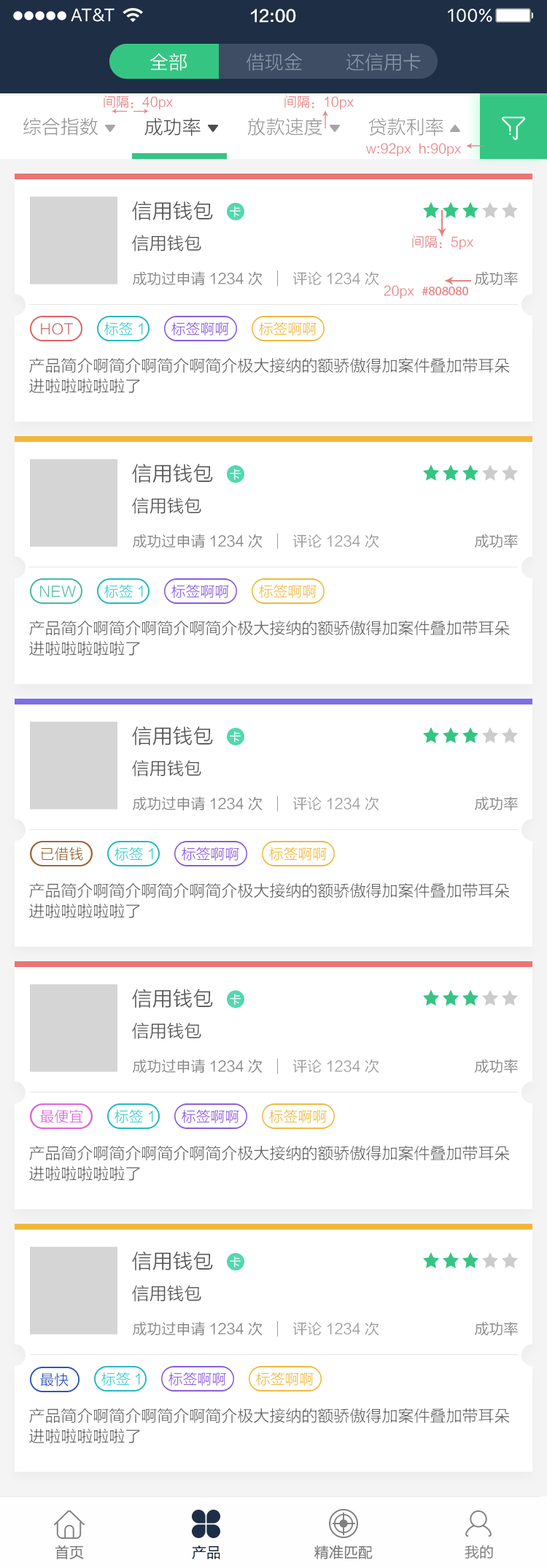
<style>
.page{position:relative;width:547px;height:1568px;background:#ffffff}
.page>*{position:absolute;margin:0}
.t1{font:16px "FZLTZHK--GBK1-0";color:#ffffff}
.t2{font:19px "FZLTXHK";color:#ffffff}
.t3{font:19px "FZLTXHK";color:#8895a8}
.t4{font:13.1px "FZLTXHK";color:#e68181}
.t5{font:19px "FZLTXHK";color:#999999}
.t6{font:19px "FZLTXHK";color:#4d4d4d}
.t7{font:20.4px "FZLTXHK";color:#4d4d4d}
.t8{font:11.7px "FZLTXHK";color:#ffffff}
.t9{font:17.5px "FZLTXHK";color:#4d4d4d}
.t10{font:14.6px "FZLTXHK";color:#808080}
.t11{font:14.6px "FZLTXHK";color:#999999}
.t12{font:13.1px "MyriadPro-Regular";color:#e68181}
.t13{font:14.6px "FZLTXHK";color:#cc6666}
.t14{font:14.6px "FZLTXHK";color:#33cccc}
.t15{font:14.6px "FZLTXHK";color:#8857db}
.t16{font:14.6px "FZLTXHK";color:#f1b73c}
.t17{font:16px/20.4px "FZLTXHK";color:#666666}
.t18{font:14.6px "FZLTXHK";color:#45b991}
.t19{font:14.6px "FZLTXHK";color:#996633}
.t20{font:14.6px "FZLTXHK";color:#db5edc}
.t21{font:14.6px "FZLTXHK";color:#294fbb}
.t22{font:14.6px "FZLTXHK";color:#1e2e45}
.t23{font:14.6px "FZLTHK--GBK1-0";color:#808080}
</style>
<div class="page">
<p class="t1" style="left:251px;top:9px;width:45px;height:14px">12:00</p>
<p class="t2" style="left:150px;top:53px;width:37px;height:18px">全部</p>
<p class="t3" style="left:246px;top:53px;width:56px;height:18px">借现金</p>
<p class="t3" style="left:346px;top:53px;width:75px;height:18px">还信用卡</p>
<p class="t4" style="left:104px;top:96px;width:69px;height:14px">间隔：40px</p>
<p class="t4" style="left:284px;top:96px;width:70px;height:14px">间隔：10px</p>
<p class="t5" style="left:23px;top:117px;width:75px;height:19px">综合指数</p>
<p class="t6" style="left:144px;top:117px;width:57px;height:19px">成功率</p>
<p class="t5" style="left:247px;top:117px;width:75px;height:19px">放款速度</p>
<p class="t5" style="left:368px;top:117px;width:75px;height:19px">贷款利率</p>
<p class="t4" style="left:366px;top:143px;width:95px;height:14px">w:92px  h:90px</p>
<p class="t7" style="left:132px;top:201px;width:81px;height:19px">信用钱包</p>
<p class="t8" style="left:230px;top:206px;width:11px;height:11px">卡</p>
<p class="t9" style="left:132px;top:235px;width:69px;height:17px">信用钱包</p>
<p class="t4" style="left:412px;top:236px;width:61px;height:14px">间隔：5px</p>
<p class="t10" style="left:133px;top:271px;width:130px;height:15px">成功过申请1234次</p>
<p class="t11" style="left:292px;top:271px;width:87px;height:14px">评论1234次</p>
<p class="t10" style="left:475px;top:271px;width:43px;height:15px">成功率</p>
<p class="t12" style="left:384px;top:285px;width:84px;height:14px"><span class="t4">20px  </span>#808080</p>
<p class="t13" style="left:41px;top:323px;width:33px;height:12px">HOT</p>
<p class="t14" style="left:104px;top:322px;width:39px;height:13px">标签1</p>
<p class="t15" style="left:171px;top:322px;width:58px;height:13px">标签啊啊</p>
<p class="t16" style="left:259px;top:322px;width:58px;height:13px">标签啊啊</p>
<p class="t17" style="left:29px;top:357px;width:481px;height:36px">产品简介啊简介啊简介啊简介极大接纳的额骄傲得加案件叠加带耳朵<br>进啦啦啦啦啦了</p>
<p class="t7" style="left:132px;top:464px;width:81px;height:19px">信用钱包</p>
<p class="t8" style="left:230px;top:468px;width:11px;height:12px">卡</p>
<p class="t9" style="left:132px;top:497px;width:69px;height:17px">信用钱包</p>
<p class="t10" style="left:133px;top:534px;width:130px;height:14px">成功过申请1234次</p>
<p class="t11" style="left:292px;top:534px;width:87px;height:14px">评论1234次</p>
<p class="t10" style="left:475px;top:534px;width:43px;height:14px">成功率</p>
<p class="t18" style="left:40px;top:586px;width:36px;height:11px">NEW</p>
<p class="t14" style="left:104px;top:584px;width:39px;height:14px">标签1</p>
<p class="t15" style="left:171px;top:584px;width:58px;height:14px">标签啊啊</p>
<p class="t16" style="left:259px;top:584px;width:58px;height:14px">标签啊啊</p>
<p class="t17" style="left:29px;top:620px;width:481px;height:36px">产品简介啊简介啊简介啊简介极大接纳的额骄傲得加案件叠加带耳朵<br>进啦啦啦啦啦了</p>
<p class="t7" style="left:132px;top:726px;width:81px;height:19px">信用钱包</p>
<p class="t8" style="left:230px;top:731px;width:11px;height:11px">卡</p>
<p class="t9" style="left:132px;top:760px;width:69px;height:17px">信用钱包</p>
<p class="t10" style="left:133px;top:796px;width:130px;height:15px">成功过申请1234次</p>
<p class="t11" style="left:292px;top:796px;width:87px;height:14px">评论1234次</p>
<p class="t10" style="left:475px;top:796px;width:43px;height:15px">成功率</p>
<p class="t19" style="left:41px;top:847px;width:42px;height:14px">已借钱</p>
<p class="t14" style="left:115px;top:847px;width:38px;height:14px">标签1</p>
<p class="t15" style="left:182px;top:847px;width:57px;height:14px">标签啊啊</p>
<p class="t16" style="left:269px;top:847px;width:58px;height:14px">标签啊啊</p>
<p class="t17" style="left:29px;top:882px;width:481px;height:36px">产品简介啊简介啊简介啊简介极大接纳的额骄傲得加案件叠加带耳朵<br>进啦啦啦啦啦了</p>
<p class="t7" style="left:132px;top:989px;width:81px;height:19px">信用钱包</p>
<p class="t8" style="left:230px;top:993px;width:11px;height:12px">卡</p>
<p class="t9" style="left:132px;top:1022px;width:69px;height:17px">信用钱包</p>
<p class="t10" style="left:133px;top:1059px;width:130px;height:15px">成功过申请1234次</p>
<p class="t11" style="left:292px;top:1059px;width:87px;height:14px">评论1234次</p>
<p class="t10" style="left:475px;top:1059px;width:43px;height:15px">成功率</p>
<p class="t20" style="left:40px;top:1109px;width:43px;height:14px">最便宜</p>
<p class="t14" style="left:115px;top:1109px;width:38px;height:14px">标签1</p>
<p class="t15" style="left:182px;top:1109px;width:57px;height:14px">标签啊啊</p>
<p class="t16" style="left:269px;top:1109px;width:58px;height:14px">标签啊啊</p>
<p class="t17" style="left:29px;top:1145px;width:481px;height:36px">产品简介啊简介啊简介啊简介极大接纳的额骄傲得加案件叠加带耳朵<br>进啦啦啦啦啦了</p>
<p class="t7" style="left:132px;top:1251px;width:81px;height:19px">信用钱包</p>
<p class="t8" style="left:230px;top:1256px;width:11px;height:12px">卡</p>
<p class="t9" style="left:132px;top:1285px;width:69px;height:17px">信用钱包</p>
<p class="t10" style="left:133px;top:1321px;width:130px;height:15px">成功过申请1234次</p>
<p class="t11" style="left:292px;top:1321px;width:87px;height:14px">评论1234次</p>
<p class="t10" style="left:475px;top:1321px;width:43px;height:15px">成功率</p>
<p class="t21" style="left:40px;top:1373px;width:29px;height:13px">最快</p>
<p class="t14" style="left:101px;top:1372px;width:39px;height:14px">标签1</p>
<p class="t15" style="left:168px;top:1372px;width:58px;height:14px">标签啊啊</p>
<p class="t16" style="left:256px;top:1372px;width:58px;height:14px">标签啊啊</p>
<p class="t17" style="left:29px;top:1408px;width:481px;height:35px">产品简介啊简介啊简介啊简介极大接纳的额骄傲得加案件叠加带耳朵<br>进啦啦啦啦啦了</p>
<p class="t10" style="left:55px;top:1545px;width:29px;height:14px">首页</p>
<p class="t22" style="left:192px;top:1545px;width:28px;height:14px">产品</p>
<p class="t10" style="left:314px;top:1545px;width:59px;height:14px">精准匹配</p>
<p class="t23" style="left:465px;top:1545px;width:28px;height:14px">我的</p>
</div>
